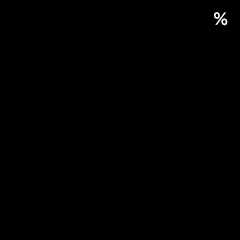
<style>
.page{position:relative;width:240px;height:240px;background:#000000}
.page>*{position:absolute;margin:0}
.t1{font:15px "BIZ-UDPGothic";color:#ffffff}
</style>
<div class="page">
<p class="t1" style="left:214px;top:12px;width:14px;height:14px">%</p>
</div>
